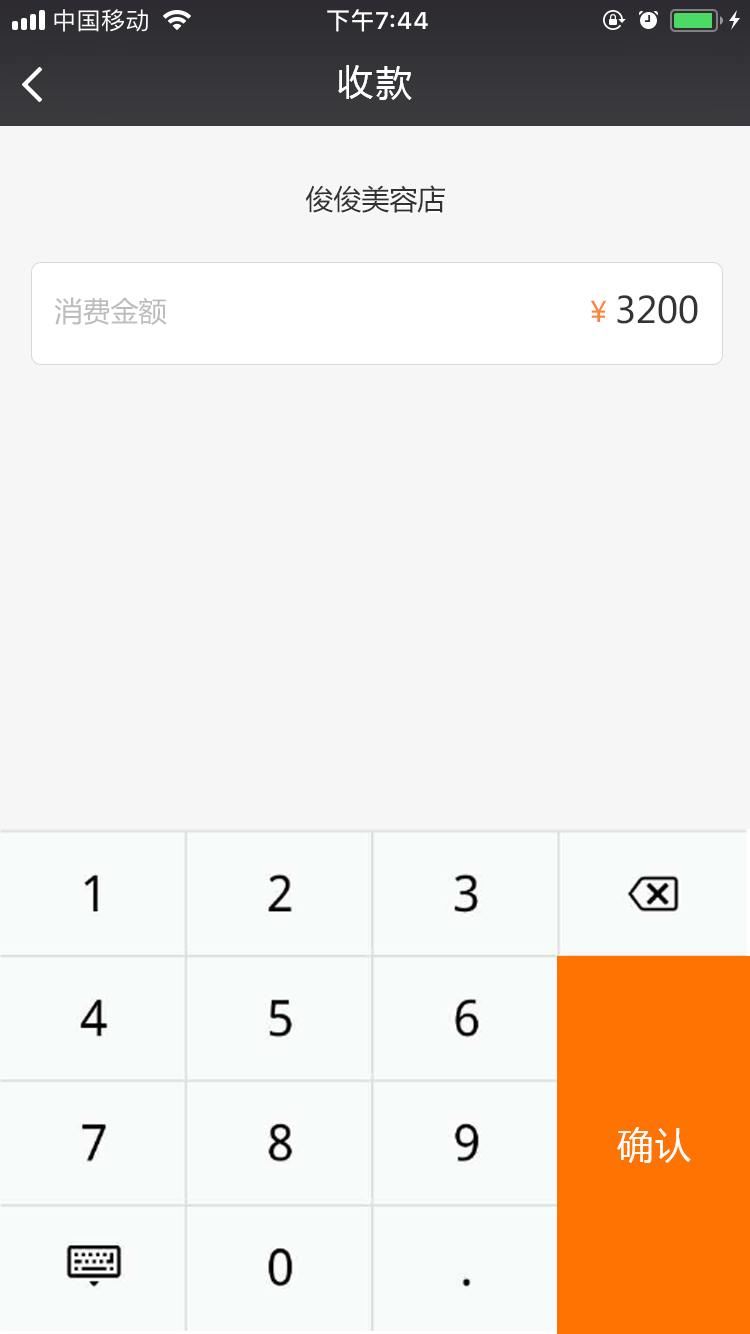
<style>
.page{position:relative;width:750px;height:1334px;background:#f6f6f6}
.page>*{position:absolute;margin:0}
.t1{font:36px "MicrosoftYaHei";letter-spacing:0.08em;color:#ffffff}
.t2{font:28px "MicrosoftYaHei";color:#323232}
.t3{font:28px "MicrosoftYaHei";color:#b4b4b4}
.t4{font:28px "MicrosoftYaHei";color:#fe8435}
.t5{font:36px "MicrosoftYaHei";color:#343434}
.t6{font:28px "MicrosoftYaHei";color:#343434}
</style>
<div class="page">
<p class="t1" style="left:338px;top:65px;width:74px;height:35px">收款</p>
<p class="t2" style="left:305px;top:185px;width:140px;height:28px">俊俊美容店</p>
<p class="t3" style="left:54px;top:297px;width:113px;height:28px">消费金额</p>
<p class="t4" style="left:590px;top:300px;width:17px;height:22px">￥</p>
<p class="t5" style="left:617px;top:295px;width:81px;height:29px"><span class="t6"> </span>3200</p>
<p class="t1" style="left:617px;top:1127px;width:74px;height:36px">确认</p>
</div>
